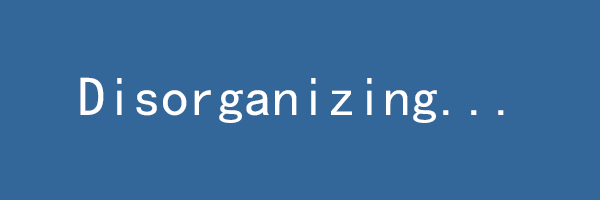
<style>
.page{position:relative;width:600px;height:200px;background:#336699}
.page>*{position:absolute;margin:0}
.t1{font:55.6px "SimHei";color:#ffffff}
</style>
<div class="page">
<p class="t1" style="left:80px;top:77px;width:424px;height:46px">Disorganizing...</p>
</div>
